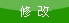
<style>
.page{position:relative;width:69px;height:23px}
.page>*{position:absolute;margin:0}
.t1{font:12px "SimSun";color:#fcfcfc}
</style>
<div class="page">
<p class="t1" style="left:20px;top:6px;width:29px;height:11px">修 改</p>
</div>
